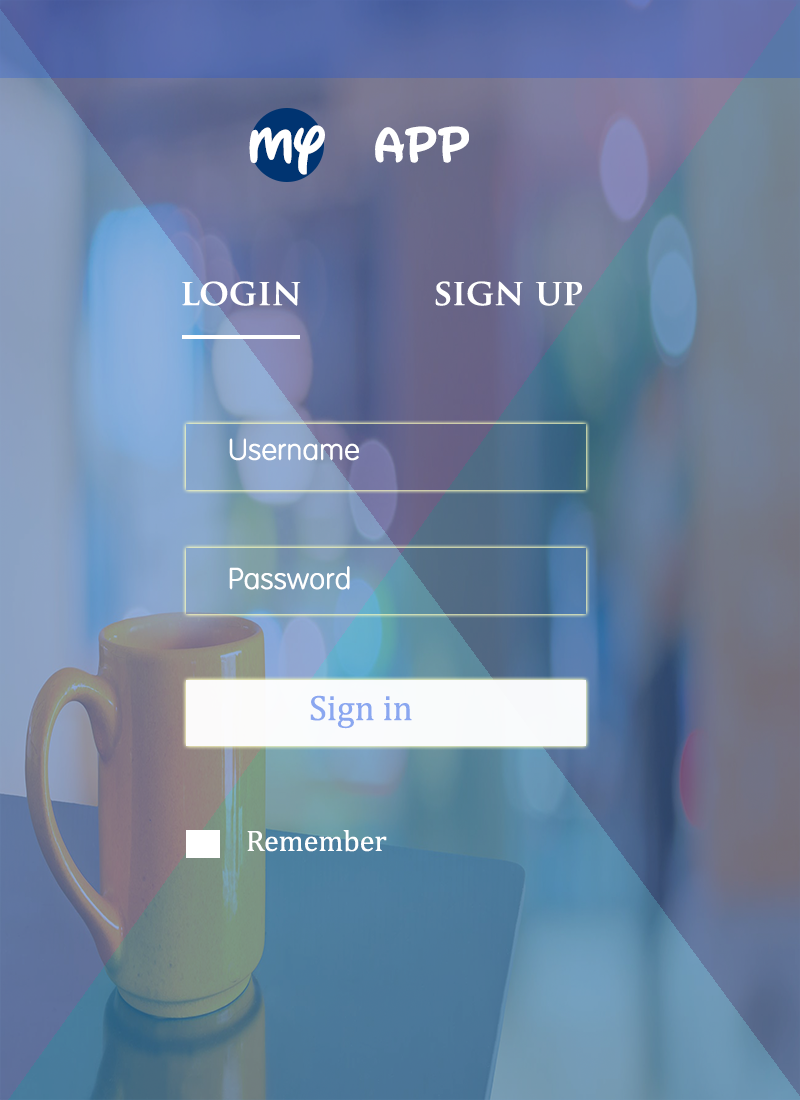
<style>
.page{position:relative;width:800px;height:1100px}
.page>*{position:absolute;margin:0}
.t1{font:48px "WaltographUI-Bold";color:#ffffff}
.t2{font:36px "TrajanPro-Bold";color:#ffffff}
.t3{font:30px "VAGRounded-Thin";color:#ffffff}
.t4{font:36px "Cambria";color:#8aa7f0}
.t5{font:30px "Cambria";color:#ffffff}
</style>
<div class="page">
<p class="t1" style="left:249px;top:125px;width:220px;height:50px">My  aPP</p>
<p class="t2" style="left:182px;top:281px;width:119px;height:25px">login</p>
<p class="t2" style="left:435px;top:281px;width:147px;height:25px">sign up</p>
<p class="t3" style="left:229px;top:438px;width:130px;height:23px">Username</p>
<p class="t3" style="left:229px;top:566px;width:121px;height:24px">Password</p>
<p class="t4" style="left:310px;top:695px;width:102px;height:34px">Sign in</p>
<p class="t5" style="left:247px;top:830px;width:140px;height:22px">Remember</p>
</div>
